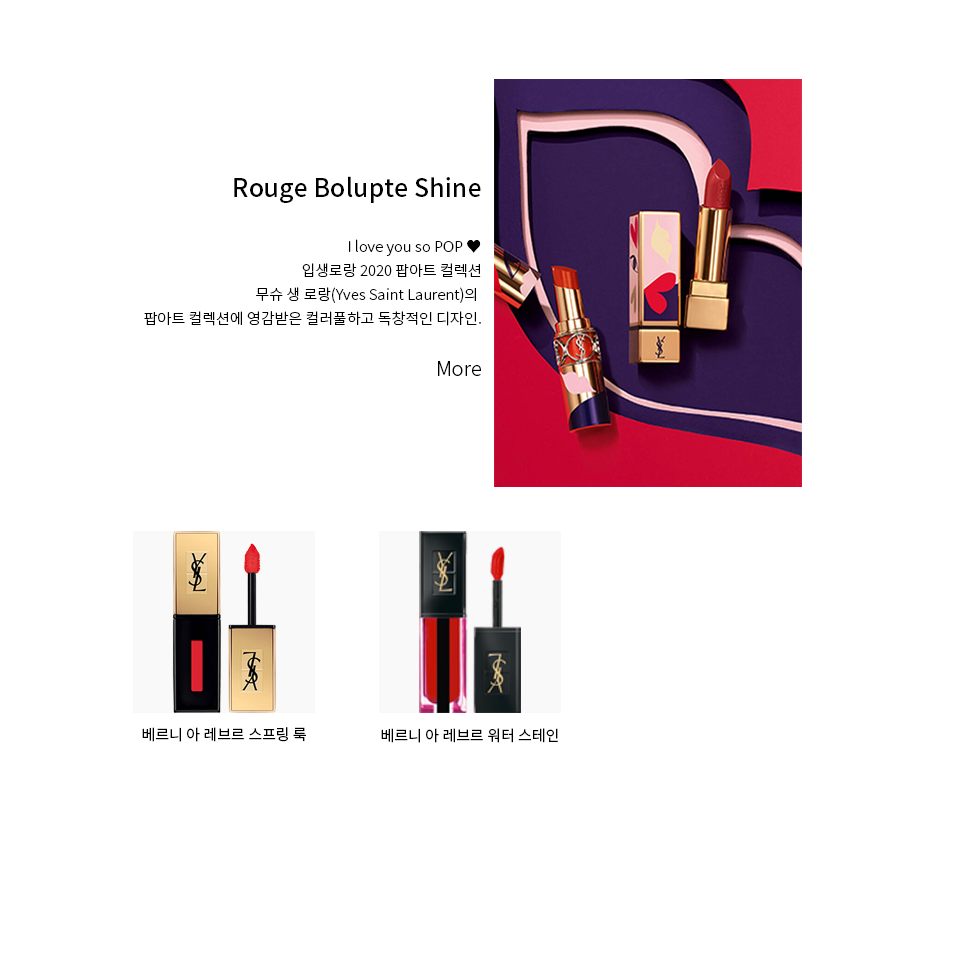
<style>
.page{position:relative;width:960px;height:974px;background:#ffffff}
.page>*{position:absolute;margin:0}
.t1{font:25px "NotoSansKR-Medium";color:#000000}
.t2{font:15px/24px "NotoSansKR-Light";color:#000000}
.t3{font:20px "NotoSansKR-Light";color:#000000}
.t4{font:15px "NotoSansKR-Regular";color:#000000}
</style>
<div class="page">
<p class="t1" style="left:234px;top:176px;width:247px;height:27px">Rouge Bolupte Shine</p>
<p class="t2" style="left:144px;top:239px;width:337px;height:87px;text-align:right">I love you so POP ♥<br>입생로랑 2020 팝아트 컬렉션<br>무슈 생 로랑(Yves Saint Laurent)의 <br>팝아트 컬렉션에 영감받은 컬러풀하고 독창적인 디자인.</p>
<p class="t3" style="left:438px;top:361px;width:43px;height:15px">More</p>
<p class="t4" style="left:142px;top:727px;width:164px;height:15px">베르니 아 레브르 스프링 룩</p>
<p class="t4" style="left:381px;top:728px;width:177px;height:15px">베르니 아 레브르 워터 스테인</p>
</div>
